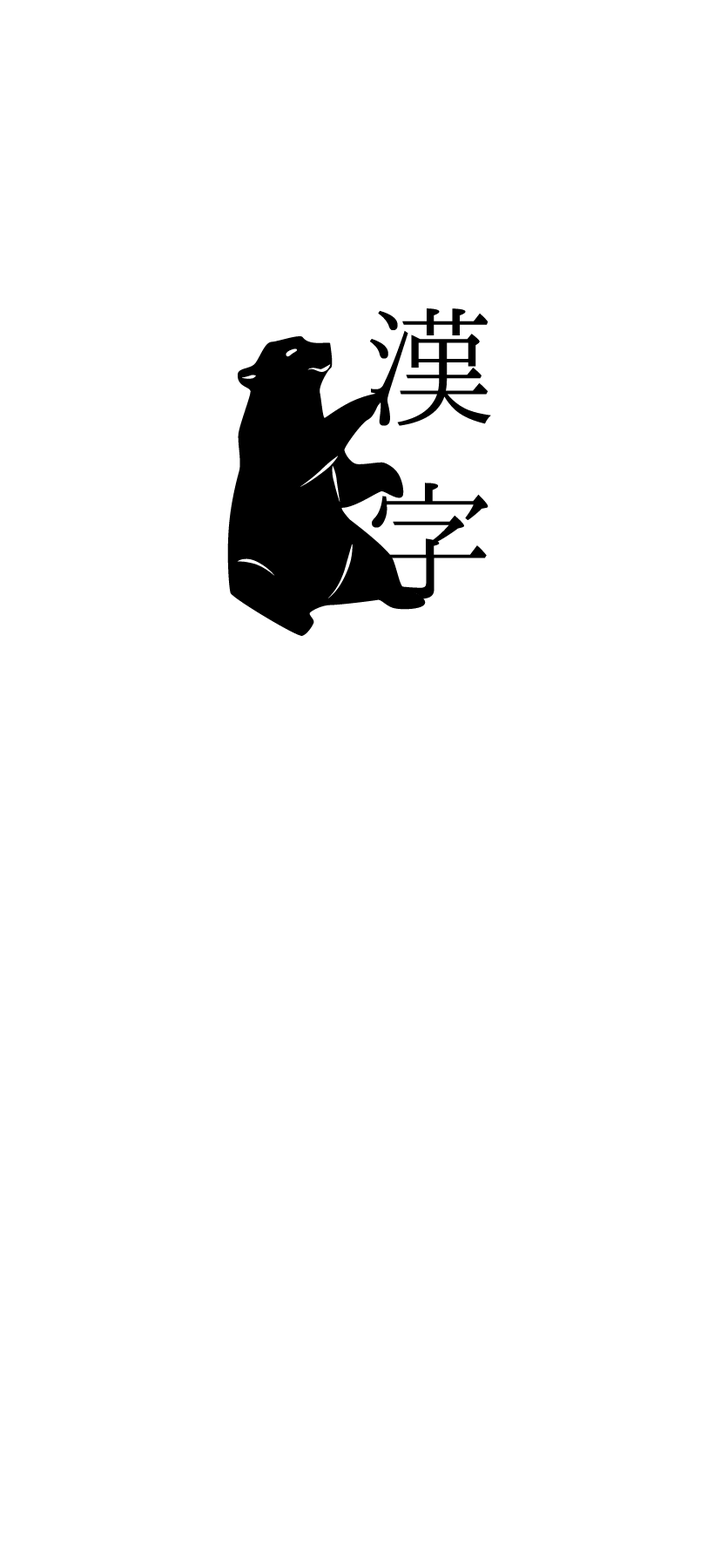
<style>
.page{position:relative;width:714px;height:1568px;background:#ffffff}
.page>*{position:absolute;margin:0}
.t1{font:145.2px "HannariMincho";color:#000000}
</style>
<div class="page">
<p class="t1" style="left:370px;top:308px;width:121px;height:291px">漢<br>字</p>
</div>
